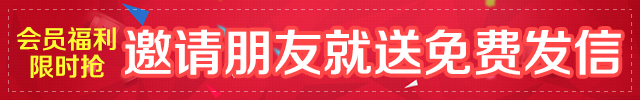
<style>
.page{position:relative;width:640px;height:100px}
.page>*{position:absolute;margin:0}
.t1{font:25.7px/27.4px "FZZZHONGJW--GB1-0";color:#fdfc33}
.t2{font:50px "FZZZHONGJW--GB1-0";color:#ffffff}
</style>
<div class="page">
<p class="t1" style="left:17px;top:27px;width:99px;height:51px;text-align:center">会员福利<br>限时抢</p>
<p class="t2" style="left:125px;top:29px;width:496px;height:46px">邀请朋友就送免费发信</p>
</div>
